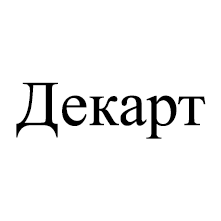
<style>
.page{position:relative;width:221px;height:221px;background:#ffffff}
.page>*{position:absolute;margin:0}
.t1{font:63.9px "TimesNewRomanPSMT";color:#000000}
</style>
<div class="page">
<p class="t1" style="left:16px;top:82px;width:190px;height:57px">Декарт</p>
</div>
